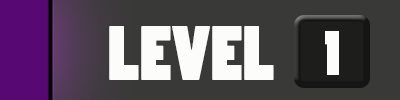
<style>
.page{position:relative;width:400px;height:100px;background:#393a38}
.page>*{position:absolute;margin:0}
.t1{font:72.2px "PoplarStd";color:#fcfcfb;scale:1.07 1}
.t2{font:60px "PoplarStd";color:#fcfcfb}
</style>
<div class="page">
<p class="t1" style="left:109px;top:26px;width:165px;height:54px">LEVEL</p>
<p class="t2" style="left:325px;top:31px;width:14px;height:44px">1</p>
</div>
